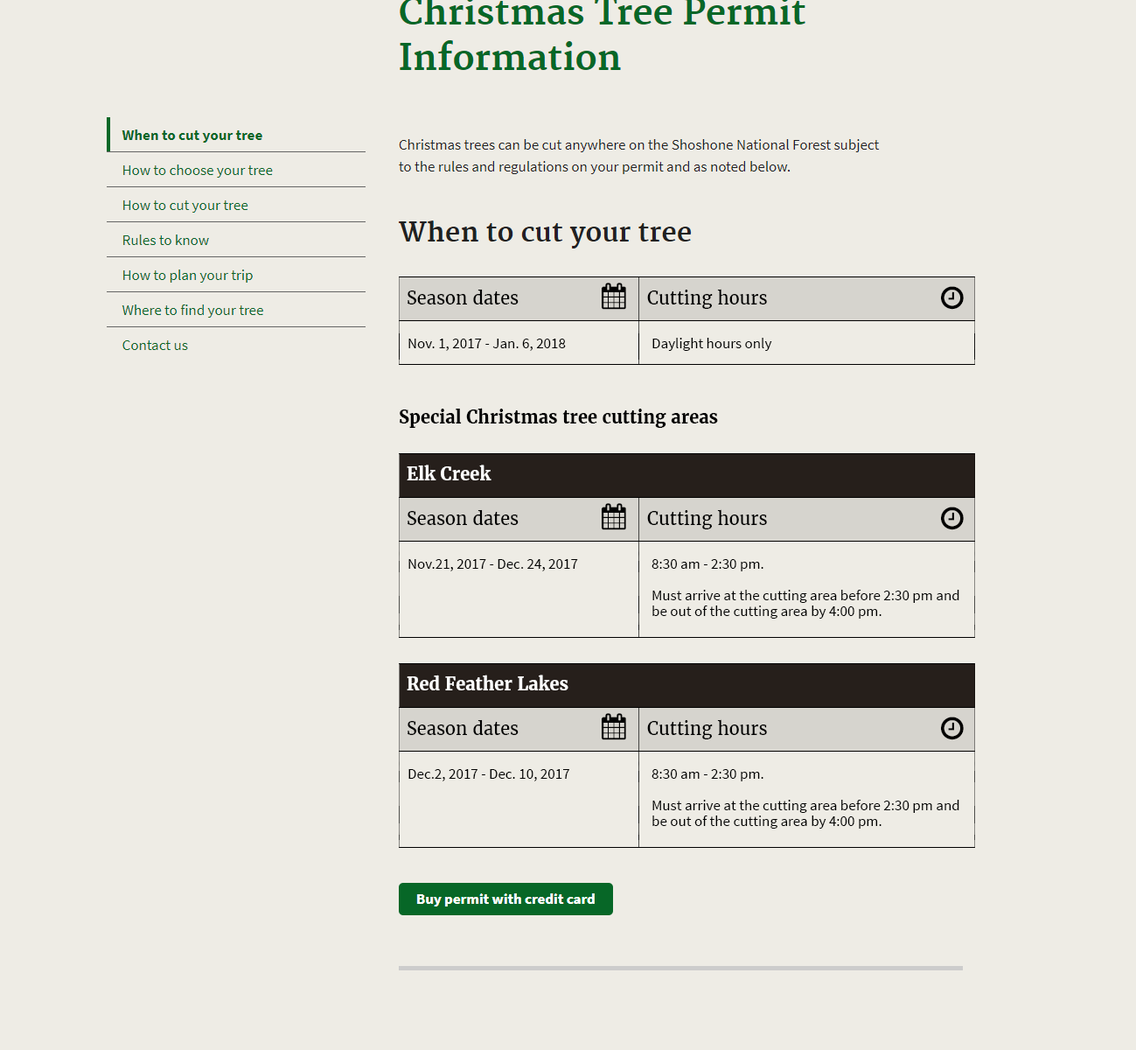
<style>
.page{position:relative;width:1136px;height:1050px;background:#eeece5}
.page>*{position:absolute;margin:0}
.t1{font:17.5px "Merriweather-Regular";color:#000000}
.t2{font:14.9px "SourceSansPro-Regular";color:#000000}
.t3{font:17.5px "Merriweather-Bold";color:#000000}
.t4{font:17.5px "Merriweather-Bold";color:#ffffff}
.t5{font:14.9px/15.7px "SourceSansPro-Regular";color:#000000}
</style>
<div class="page">
<p class="t1" style="left:408px;top:289px;width:111px;height:15px">Season dates</p>
<p class="t1" style="left:647px;top:289px;width:120px;height:20px">Cutting hours</p>
<p class="t2" style="left:408px;top:338px;width:158px;height:13px">Nov. 1, 2017 - Jan. 6, 2018</p>
<p class="t2" style="left:652px;top:338px;width:120px;height:13px">Daylight hours only</p>
<p class="t3" style="left:400px;top:408px;width:318px;height:20px">Special Christmas tree cutting areas</p>
<p class="t4" style="left:407px;top:464px;width:85px;height:16px">Elk Creek</p>
<p class="t1" style="left:408px;top:509px;width:111px;height:16px">Season dates</p>
<p class="t1" style="left:647px;top:509px;width:120px;height:20px">Cutting hours</p>
<p class="t2" style="left:408px;top:559px;width:170px;height:12px">Nov.21, 2017 - Dec. 24, 2017</p>
<p class="t5" style="left:652px;top:559px;width:307px;height:59px">8:30 am - 2:30 pm.<br><br>Must arrive at the cutting area before 2:30 pm and <br>be out of the cutting area by 4:00 pm.</p>
<p class="t4" style="left:407px;top:674px;width:162px;height:16px">Red Feather Lakes</p>
<p class="t1" style="left:408px;top:719px;width:111px;height:16px">Season dates</p>
<p class="t1" style="left:647px;top:719px;width:120px;height:20px">Cutting hours</p>
<p class="t2" style="left:408px;top:769px;width:161px;height:12px">Dec.2, 2017 - Dec. 10, 2017</p>
<p class="t5" style="left:652px;top:769px;width:307px;height:59px">8:30 am - 2:30 pm.<br><br>Must arrive at the cutting area before 2:30 pm and <br>be out of the cutting area by 4:00 pm.</p>
</div>
